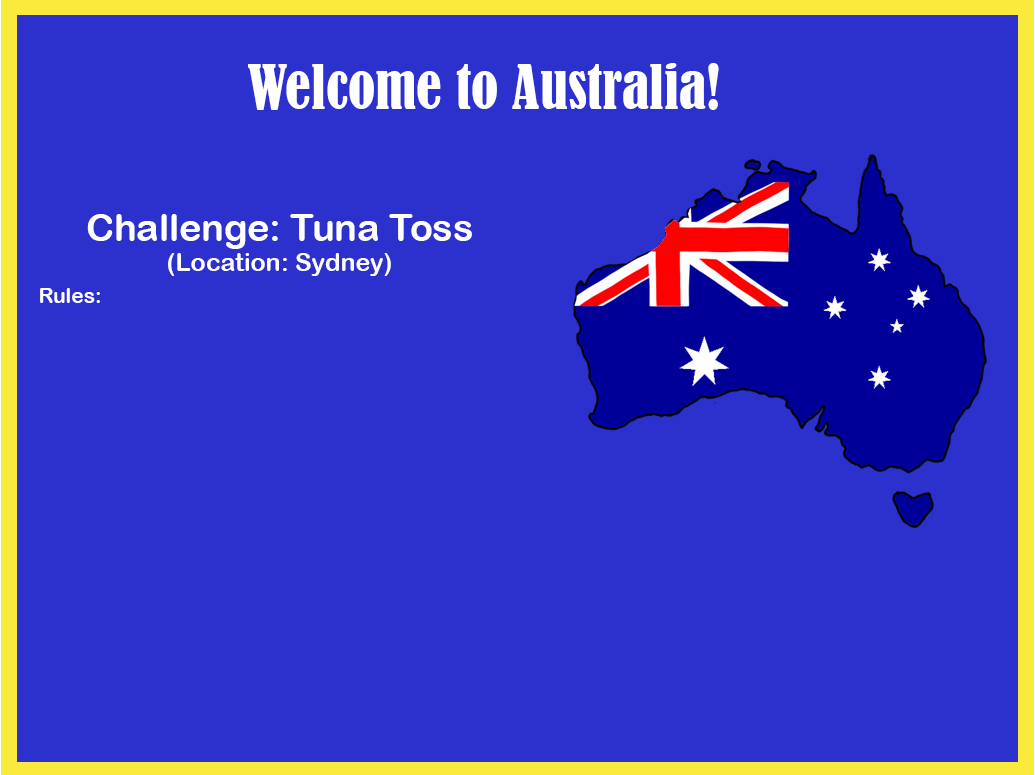
<style>
.page{position:relative;width:1035px;height:775px;background:#2c30cd}
.page>*{position:absolute;margin:0}
.t1{font:56.9px "BernardMT-Condensed";color:#ffffff}
.t2{font:37.5px "ArialRoundedMTBold";color:#ffffff}
.t3{font:25px "ArialRoundedMTBold";color:#ffffff}
.t4{font:20.9px "ArialRoundedMTBold";color:#ffffff}
</style>
<div class="page">
<p class="t1" style="left:248px;top:63px;width:471px;height:47px">Welcome to Australia!</p>
<p class="t2" style="left:87px;top:214px;width:385px;height:62px;text-align:center">Challenge: Tuna Toss<br><span class="t3">(Location: Sydney)</span></p>
<p class="t4" style="left:40px;top:288px;width:60px;height:15px">Rules:</p>
</div>
